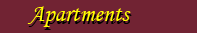
<style>
.page{position:relative;width:197px;height:33px;background:#712333}
.page>*{position:absolute;margin:0}
.t1{font:24px "MonotypeCorsiva";color:#ffff00}
.t2{font:24px "MonotypeCorsiva";color:#000000}
</style>
<div class="page">
<p class="t1" style="left:27px;top:6px;width:104px;height:21px">Apartments</p>
<p class="t2" style="left:28px;top:9px;width:104px;height:21px">Apartments</p>
</div>
